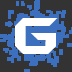
<style>
.page{position:relative;width:72px;height:72px;background:#333333}
.page>*{position:absolute;margin:0}
.t1{font:60px "BatmanForeverAlternateCyr";color:#ffffff}
</style>
<div class="page">
<p class="t1" style="left:15px;top:18px;width:43px;height:36px">G</p>
</div>
